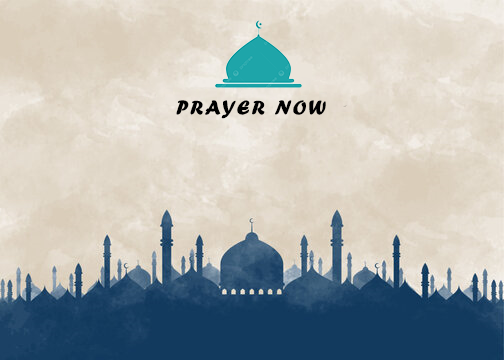
<style>
.page{position:relative;width:504px;height:360px}
.page>*{position:absolute;margin:0}
.t1{font:21px "ForteMT";letter-spacing:0.1em;color:#000000;text-transform:uppercase}
</style>
<div class="page">
<p class="t1" style="left:176px;top:100px;width:150px;height:19px">prayer now</p>
</div>
